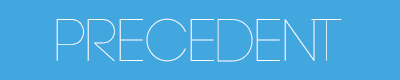
<style>
.page{position:relative;width:400px;height:80px;background:#43a7df}
.page>*{position:absolute;margin:0}
.t1{font:60px "Code-Light";color:#ffffff}
</style>
<div class="page">
<p class="t1" style="left:56px;top:18px;width:286px;height:44px">precedent</p>
</div>
